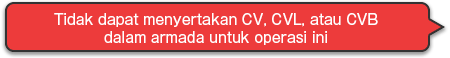
<style>
.page{position:relative;width:450px;height:58px;background:#ed3b3b}
.page>*{position:absolute;margin:0}
.t1{font:14px/18px "GothicMB101Pro-Regular";color:#ffffff}
</style>
<div class="page">
<p class="t1" style="left:54px;top:13px;width:324px;height:32px;text-align:center">Tidak dapat menyertakan CV, CVL, atau CVB<br>dalam armada untuk operasi ini</p>
</div>
